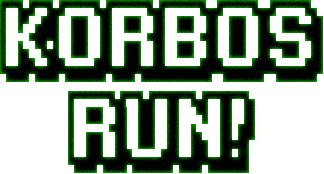
<style>
.page{position:relative;width:324px;height:174px;background:#ffffff}
.page>*{position:absolute;margin:0}
.t1{font:84.6px/91px "KarmaticArcade";scale:0.71 1}
</style>
<div class="page">
<p class="t1" style="left:0px;top:0px;width:323px;height:173px;text-align:center">Korbos<br>run!</p>
</div>
